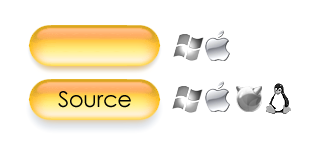
<style>
.page{position:relative;width:312px;height:144px;background:#ffffff}
.page>*{position:absolute;margin:0}
.t1{font:22px "CenturyGothic";color:#010203}
</style>
<div class="page">
<p class="t1" style="left:58px;top:91px;width:73px;height:17px">Source</p>
</div>
